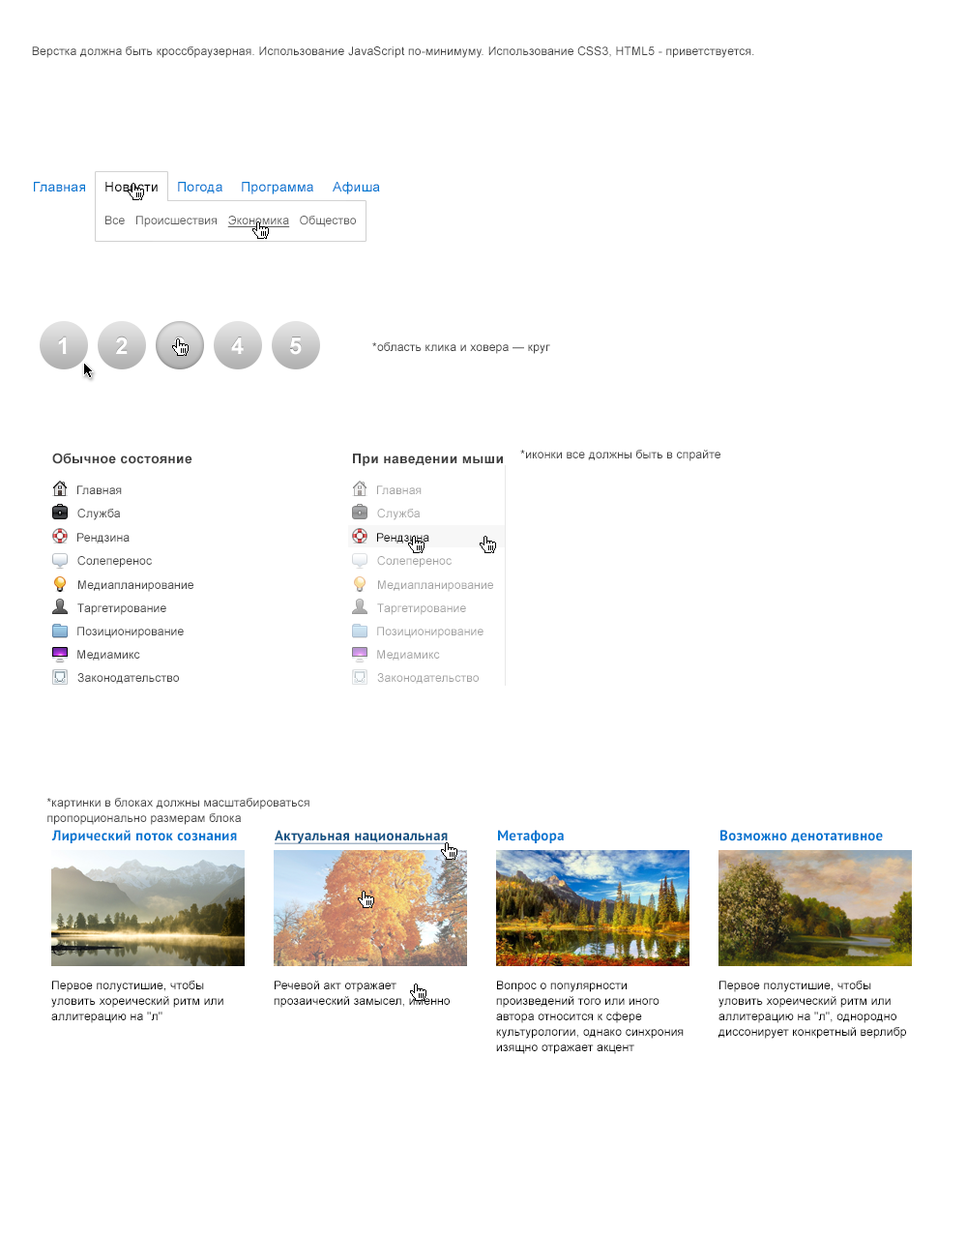
<style>
.page{position:relative;width:967px;height:1234px;background:#ffffff}
.page>*{position:absolute;margin:0}
.t1{font:11.6px "ArialMT";letter-spacing:0.02em;color:#404040}
.t2{font:13.5px "ArialMT";letter-spacing:0.02em;color:#0076d1}
.t3{font:13.5px "ArialMT";letter-spacing:0.02em;color:#000000}
.t4{font:11.6px "ArialMT";letter-spacing:0.02em;color:#5c5c5c}
.t5{font:11.6px "ArialMT";letter-spacing:0.02em;color:#5c5c5c;text-decoration:underline}
.t6{font:23.2px "Arial-BoldMT";letter-spacing:0.02em;color:#ffffff}
.t7{font:13.5px "Arial-BoldMT";letter-spacing:0.02em;color:#404040}
.t8{font:11.6px "ArialMT";letter-spacing:0.02em;color:#9f9f9f}
.t9{font:11.6px "ArialMT";letter-spacing:0.02em;color:#010101}
.t10{font:11.6px/15.5px "ArialMT";letter-spacing:0.02em;color:#404040}
.t11{font:14.5px "PTSans-Bold";letter-spacing:0.02em;color:#0076d1}
.t12{font:14.5px "PTSans-Bold";letter-spacing:0.02em;color:#105284;text-decoration:underline}
.t13{font:11.6px/15.5px "ArialMT";letter-spacing:0.02em;color:#000000}
</style>
<div class="page">
<p class="t1" style="left:32px;top:46px;width:722px;height:12px">Верстка должна быть кроссбраузерная. Использование JavaScript по-минимуму. Использование CSS3, HTML5 - приветствуется.</p>
<p class="t2" style="left:34px;top:182px;width:51px;height:9px">Главная</p>
<p class="t3" style="left:105px;top:182px;width:53px;height:9px">Новости</p>
<p class="t2" style="left:178px;top:182px;width:44px;height:11px">Погода</p>
<p class="t2" style="left:242px;top:182px;width:71px;height:12px">Программа</p>
<p class="t2" style="left:333px;top:182px;width:47px;height:12px">Афиша</p>
<p class="t4" style="left:105px;top:216px;width:251px;height:11px">Все   Происшествия   <span class="t5">Экономика</span>   Общество</p>
<p class="t6" style="left:58px;top:336px;width:9px;height:18px">1</p>
<p class="t6" style="left:116px;top:336px;width:12px;height:18px">2</p>
<p class="t6" style="left:231px;top:337px;width:13px;height:17px">4</p>
<p class="t6" style="left:290px;top:337px;width:12px;height:18px">5</p>
<p class="t1" style="left:372px;top:342px;width:178px;height:12px">*область клика и ховера — круг</p>
<p class="t1" style="left:520px;top:450px;width:200px;height:11px">*иконки все должны быть в спрайте</p>
<p class="t7" style="left:52px;top:452px;width:140px;height:12px">Обычное состояние</p>
<p class="t7" style="left:353px;top:453px;width:150px;height:13px">При наведении мыши</p>
<p class="t1" style="left:77px;top:485px;width:45px;height:9px">Главная</p>
<p class="t8" style="left:377px;top:485px;width:44px;height:9px">Главная</p>
<p class="t1" style="left:77px;top:508px;width:43px;height:12px">Служба</p>
<p class="t8" style="left:377px;top:508px;width:43px;height:12px">Служба</p>
<p class="t1" style="left:77px;top:533px;width:53px;height:10px">Рендзина</p>
<p class="t9" style="left:377px;top:533px;width:52px;height:10px">Рендзина</p>
<p class="t1" style="left:77px;top:556px;width:75px;height:11px">Солеперенос</p>
<p class="t8" style="left:377px;top:556px;width:74px;height:11px">Солеперенос</p>
<p class="t1" style="left:78px;top:580px;width:115px;height:12px">Медиапланирование</p>
<p class="t8" style="left:378px;top:580px;width:115px;height:12px">Медиапланирование</p>
<p class="t1" style="left:77px;top:603px;width:89px;height:12px">Таргетирование</p>
<p class="t8" style="left:377px;top:603px;width:89px;height:12px">Таргетирование</p>
<p class="t1" style="left:77px;top:626px;width:107px;height:12px">Позиционирование</p>
<p class="t8" style="left:377px;top:626px;width:106px;height:12px">Позиционирование</p>
<p class="t1" style="left:77px;top:650px;width:63px;height:10px">Медиамикс</p>
<p class="t8" style="left:377px;top:650px;width:63px;height:10px">Медиамикс</p>
<p class="t1" style="left:77px;top:673px;width:102px;height:10px">Законодательство</p>
<p class="t8" style="left:377px;top:673px;width:102px;height:10px">Законодательство</p>
<p class="t10" style="left:46px;top:798px;width:263px;height:27px">*картинки в блоках должны масштабироваться <br>пропорционально размерам блока</p>
<p class="t11" style="left:51px;top:829px;width:186px;height:14px">Лирический поток сознания</p>
<p class="t12" style="left:275px;top:829px;width:174px;height:15px">Актуальная национальная</p>
<p class="t11" style="left:498px;top:829px;width:66px;height:14px">Метафора</p>
<p class="t11" style="left:720px;top:829px;width:163px;height:13px">Возможно денотативное</p>
<p class="t13" style="left:51px;top:980px;width:172px;height:43px">Первое полустишие, чтобы уловить хореический ритм или аллитерацию на "л"</p>
<p class="t13" style="left:274px;top:980px;width:176px;height:27px">Речевой акт отражает прозаический замысел, именно</p>
<p class="t13" style="left:496px;top:980px;width:187px;height:74px">Вопрос о популярности произведений того или иного автора относится к сфере культурологии, однако синхрония изящно отражает акцент</p>
<p class="t13" style="left:718px;top:980px;width:188px;height:58px">Первое полустишие, чтобы уловить хореический ритм или аллитерацию на "л", однородно диссонирует конкретный верлибр</p>
</div>
